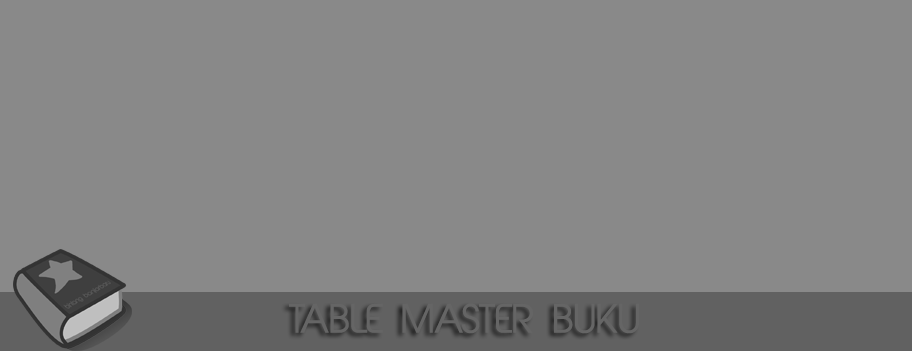
<style>
.page{position:relative;width:912px;height:351px;background:#898989}
.page>*{position:absolute;margin:0}
.t1{font:37.3px "AbeatbyKai";color:#656565}
</style>
<div class="page">
<p class="t1" style="left:289px;top:303px;width:350px;height:31px">TABLE MASTER BUKU</p>
</div>
